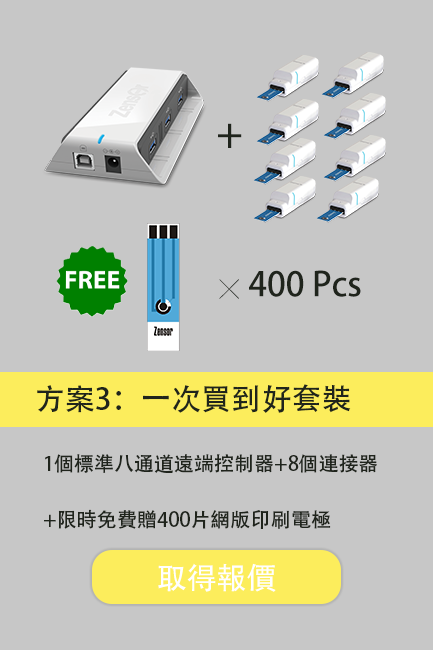
<style>
.page{position:relative;width:433px;height:650px;background:#c7c7c7}
.page>*{position:absolute;margin:0}
.t1{font:40px "AdobeHeitiStd-Regular";color:#1f241c}
.t2{font:33.3px "AdobeHeitiStd-Regular";color:#1f241c}
.t3{font:20px "SimHei";color:#1f241c}
.t4{font:30px "AdobeHeitiStd-Regular";color:#1f241c}
.t5{font:20px/55.5px "AdobeHeitiStd-Regular";color:#1f241c}
.t6{font:30px "AdobeHeitiStd-Regular";color:#ffffff}
</style>
<div class="page">
<p class="t1" style="left:218px;top:123px;width:24px;height:25px">＋</p>
<p class="t2" style="left:219px;top:270px;width:142px;height:29px"><span class="t3">╳  </span>400 Pcs</p>
<p class="t4" style="left:37px;top:384px;width:314px;height:29px">方案3：一次買到好套裝</p>
<p class="t5" style="left:44px;top:454px;width:333px;height:75px">1個標準八通道遠端控制器+8個連接器<br>+限時免費贈400片網版印刷電極</p>
<p class="t6" style="left:158px;top:563px;width:118px;height:29px">取得報價</p>
</div>
